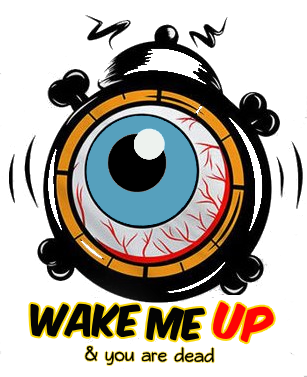
<style>
.page{position:relative;width:307px;height:377px;background:#ffffff}
.page>*{position:absolute;margin:0}
.t1{font:37px "KomikaTitle-Axis";color:#040404}
.t2{font:42px "KomikaAxis";color:#fd0405}
.t3{font:16px "QikkiReg";color:#040404}
</style>
<div class="page">
<p class="t1" style="left:30px;top:303px;width:111px;height:35px;rotate:1deg">Wake</p>
<p class="t2" style="left:212px;top:301px;width:62px;height:42px;rotate:7deg">UP</p>
<p class="t1" style="left:146px;top:307px;width:60px;height:34px;rotate:1deg">ME</p>
<p class="t3" style="left:85px;top:346px;width:129px;height:20px;rotate:1deg">&amp; you are dead</p>
</div>
